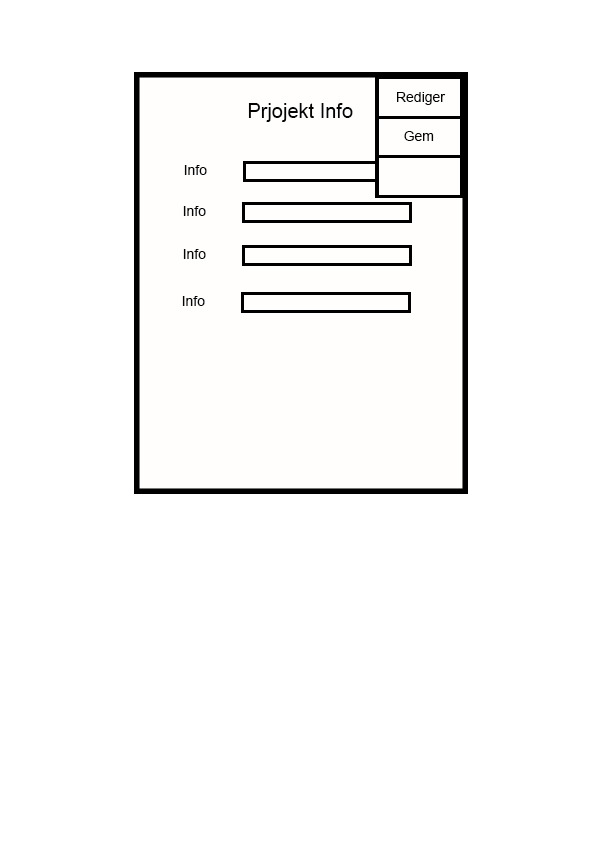
<style>
.page{position:relative;width:595px;height:842px;background:#ffffff}
.page>*{position:absolute;margin:0}
.t1{font:14px "ArialMT";color:#040404}
.t2{font:20px "ArialMT";color:#040404}
</style>
<div class="page">
<p class="t1" style="left:397px;top:92px;width:49px;height:13px">Rediger</p>
<p class="t2" style="left:248px;top:103px;width:105px;height:19px">Prjojekt Info</p>
<p class="t1" style="left:404px;top:131px;width:30px;height:10px">Gem</p>
<p class="t1" style="left:184px;top:165px;width:23px;height:10px">Info</p>
<p class="t1" style="left:183px;top:206px;width:23px;height:10px">Info</p>
<p class="t1" style="left:183px;top:249px;width:23px;height:10px">Info</p>
<p class="t1" style="left:182px;top:296px;width:23px;height:10px">Info</p>
</div>
